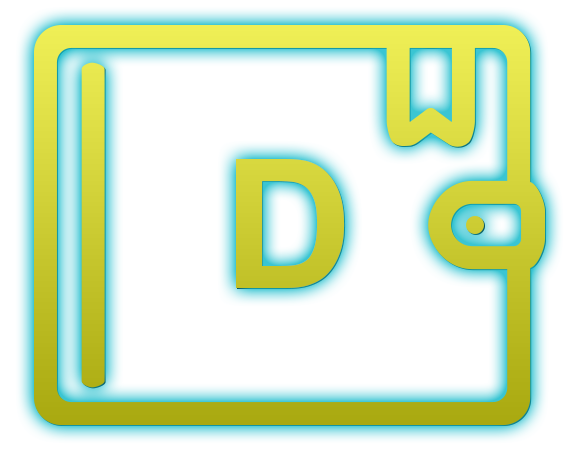
<style>
.page{position:relative;width:580px;height:450px;background:#ffffff}
.page>*{position:absolute;margin:0}
.t1{font:180px "Arial-BoldMT";letter-spacing:0.1em;color:#cccc33}
</style>
<div class="page">
<p class="t1" style="left:236px;top:159px;width:109px;height:129px">D</p>
</div>
